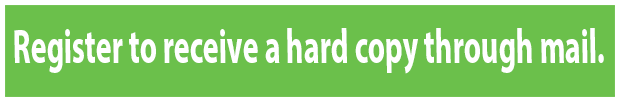
<style>
.page{position:relative;width:620px;height:102px;background:#6bc04b}
.page>*{position:absolute;margin:0}
.t1{font:48.4px "MyriadPro-Bold";color:#ffffff;scale:0.62 1}
</style>
<div class="page">
<p class="t1" style="left:14px;top:28px;width:590px;height:46px">Register to receive a hard copy through mail.</p>
</div>
